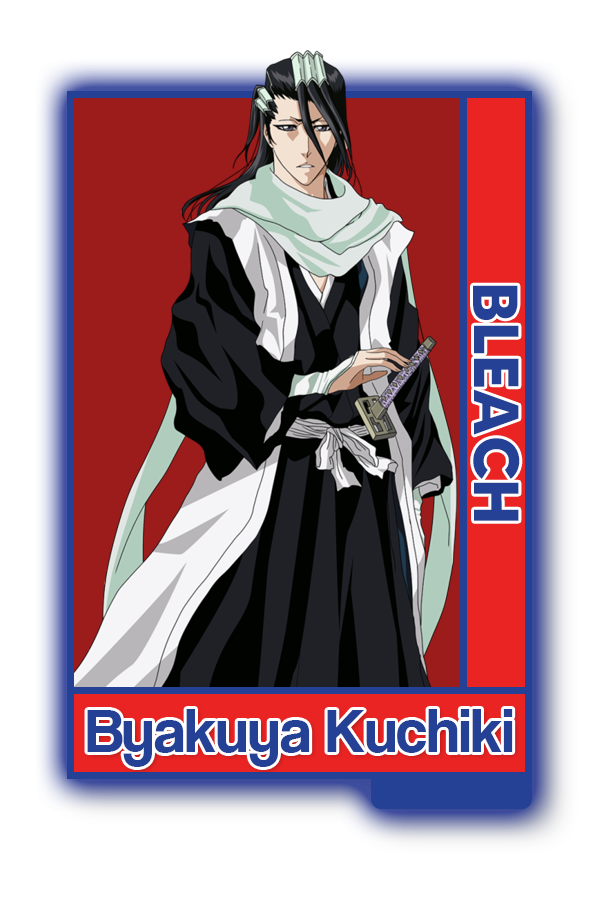
<style>
.page{position:relative;width:600px;height:900px;background:#ffffff}
.page>*{position:absolute;margin:0}
.t1{font:63.6px "MADETOMMY-Bold";color:#254195}
.t2{font:63.6px "CoolveticaRg-Regular";color:#254195}
</style>
<div class="page">
<p class="t1" style="left:473px;top:285px;width:47px;height:236px;rotate:90deg">BLEACH</p>
<p class="t2" style="left:87px;top:709px;width:426px;height:58px">Byakuya Kuchiki</p>
</div>
